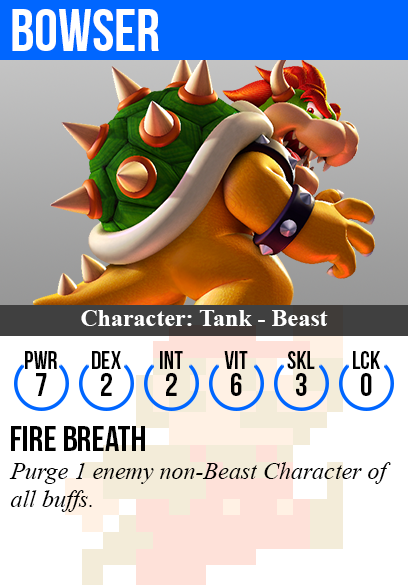
<style>
.page{position:relative;width:408px;height:585px;background:#ffffff}
.page>*{position:absolute;margin:0}
.t1{font:60px "BebasNeue";color:#ffffff}
.t2{font:24px "TimesNewRomanPS-BoldMT";color:#ffffff}
.t3{font:25px "BebasNeue";color:#000000}
.t4{font:32px "BebasNeue";color:#000000}
.t5{font:36px "BebasNeue";color:#000000}
.t6{font:24px "TimesNewRomanPS-ItalicMT";color:#000000}
</style>
<div class="page">
<p class="t1" style="left:12px;top:9px;width:147px;height:42px">bowser</p>
<p class="t2" style="left:81px;top:310px;width:247px;height:16px">Character: Tank - Beast</p>
<p class="t3" style="left:25px;top:351px;width:32px;height:18px">PWR</p>
<p class="t3" style="left:92px;top:351px;width:29px;height:18px">dex</p>
<p class="t3" style="left:160px;top:351px;width:23px;height:18px">int</p>
<p class="t3" style="left:224px;top:351px;width:24px;height:18px">vit</p>
<p class="t3" style="left:287px;top:351px;width:28px;height:18px">skl</p>
<p class="t3" style="left:353px;top:351px;width:27px;height:18px">lck</p>
<p class="t4" style="left:36px;top:373px;width:11px;height:23px">7</p>
<p class="t4" style="left:101px;top:373px;width:11px;height:23px">2</p>
<p class="t4" style="left:166px;top:373px;width:11px;height:23px">2</p>
<p class="t4" style="left:231px;top:373px;width:11px;height:23px">6</p>
<p class="t4" style="left:296px;top:373px;width:11px;height:23px">3</p>
<p class="t4" style="left:361px;top:373px;width:11px;height:23px">0</p>
<p class="t5" style="left:11px;top:426px;width:134px;height:25px">fire breath</p>
<p class="t6" style="left:9px;top:462px;width:382px;height:50px">Purge 1 enemy non-Beast Character of<br>all buffs.</p>
</div>
